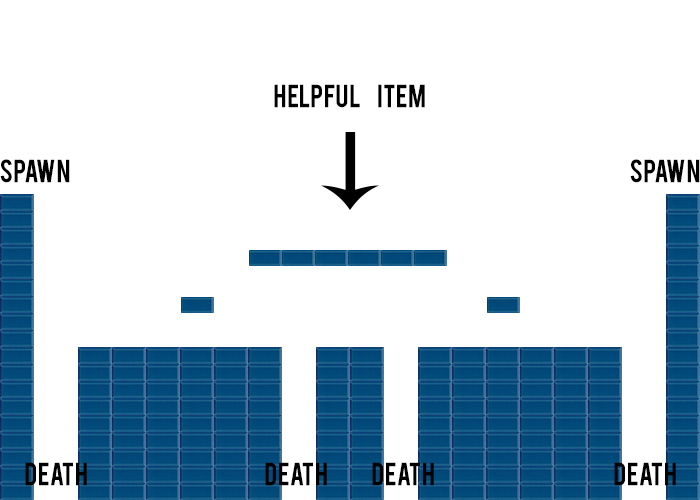
<style>
.page{position:relative;width:700px;height:500px;background:#ffffff}
.page>*{position:absolute;margin:0}
.t1{font:25px "Bebas";color:#000000;text-transform:uppercase}
</style>
<div class="page">
<p class="t1" style="left:274px;top:84px;width:151px;height:24px">Helpful       Item</p>
<p class="t1" style="left:0px;top:159px;width:70px;height:24px">Spawn</p>
<p class="t1" style="left:630px;top:159px;width:70px;height:24px">Spawn</p>
<p class="t1" style="left:25px;top:462px;width:62px;height:24px">Death</p>
<p class="t1" style="left:265px;top:462px;width:62px;height:24px">Death</p>
<p class="t1" style="left:372px;top:462px;width:62px;height:24px">Death</p>
<p class="t1" style="left:614px;top:462px;width:62px;height:24px">Death</p>
</div>
